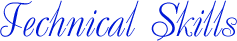
<style>
.page{position:relative;width:237px;height:41px;background:#ffffff}
.page>*{position:absolute;margin:0}
.t1{font:48px "UkrainianDecor";color:#0019d7}
</style>
<div class="page">
<p class="t1" style="left:0px;top:0px;width:237px;height:41px">Technical Skills</p>
</div>
